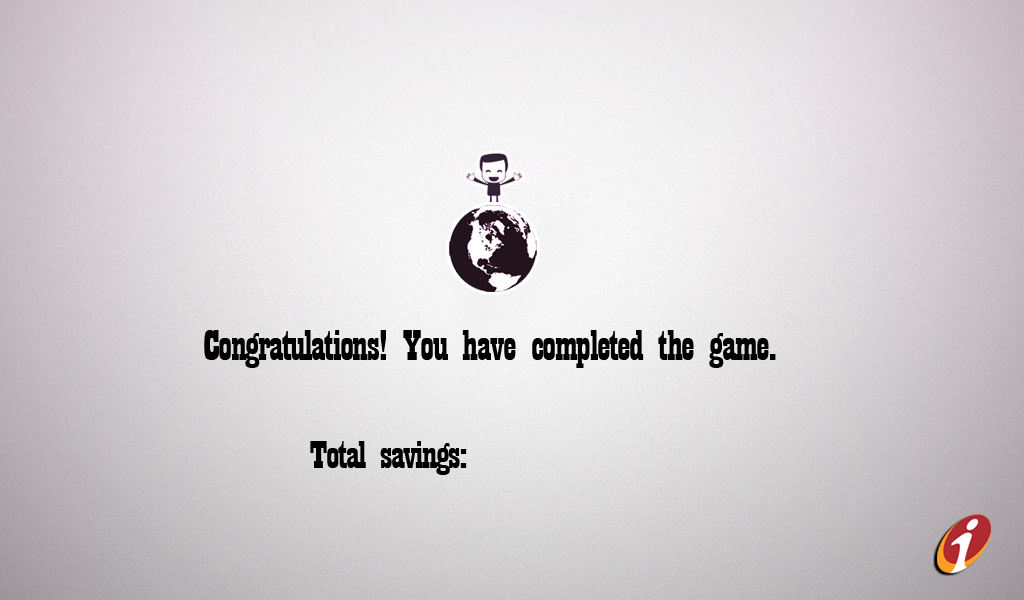
<style>
.page{position:relative;width:1024px;height:600px}
.page>*{position:absolute;margin:0}
.t1{font:45.2px "Playbill";letter-spacing:-0.025em;color:#000000;scale:1.26 1}
.t2{font:41.3px "Playbill";letter-spacing:-0.025em;color:#000000;scale:1.32 1}
</style>
<div class="page">
<p class="t1" style="left:204px;top:330px;width:572px;height:38px">Congratulations! You have completed the game.</p>
<p class="t2" style="left:310px;top:441px;width:157px;height:34px">Total savings:</p>
</div>
